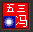
<style>
.page{position:relative;width:33px;height:32px;background:#f20000}
.page>*{position:absolute;margin:0}
.t1{font:10.4px "SimSun";color:#ffffff}
.t2{font:11.7px "SimSun";color:#ffffff}
</style>
<div class="page">
<p class="t1" style="left:7px;top:4px;width:18px;height:8px">五三</p>
<p class="t2" style="left:16px;top:15px;width:11px;height:12px">冯</p>
</div>
